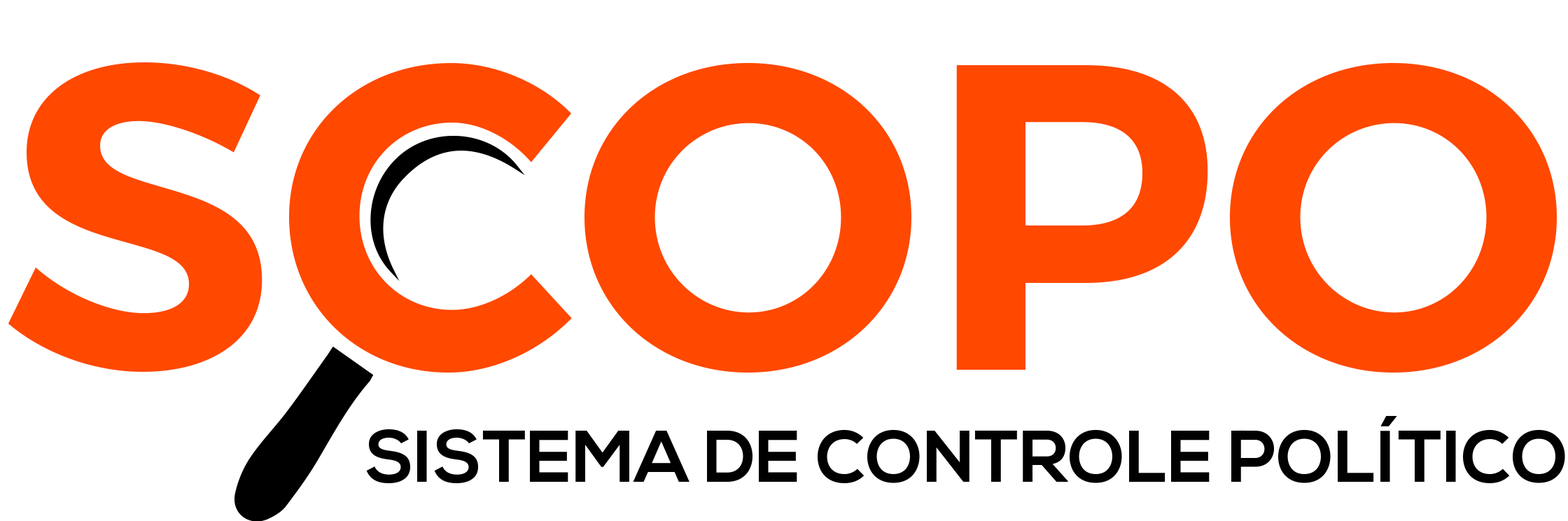
<style>
.page{position:relative;width:1568px;height:521px;background:#ffffff}
.page>*{position:absolute;margin:0}
.t1{font:434.8px "Montserrat-SemiBold";color:#ff4800}
.t2{font:72.7px "NexaBold";color:#000000}
</style>
<div class="page">
<p class="t1" style="left:8px;top:62px;width:1549px;height:311px">SCOPO</p>
<p class="t2" style="left:366px;top:416px;width:1199px;height:67px">SISTEMA DE CONTROLE POLÍTICO</p>
</div>
